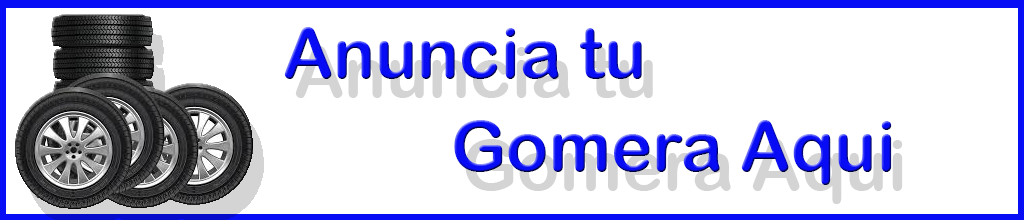
<style>
.page{position:relative;width:1024px;height:220px;background:#ffffff}
.page>*{position:absolute;margin:0}
.t1{font:70px "ArialRoundedMTBold";color:#070cf5}
</style>
<div class="page">
<p class="t1" style="left:284px;top:27px;width:358px;height:52px">Anuncia tu</p>
<p class="t1" style="left:454px;top:120px;width:438px;height:65px">Gomera Aqui</p>
</div>
